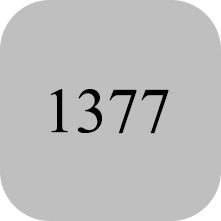
<style>
.page{position:relative;width:221px;height:221px;background:#bfbfbf}
.page>*{position:absolute;margin:0}
.t1{font:63.9px "TimesNewRomanPSMT";color:#000000}
</style>
<div class="page">
<p class="t1" style="left:50px;top:89px;width:119px;height:45px">1377</p>
</div>
